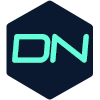
<style>
.page{position:relative;width:100px;height:100px;background:#0a192f}
.page>*{position:absolute;margin:0}
.t1{font:40px "D3-Euronism-Bold-italic";color:#64ffda}
</style>
<div class="page">
<p class="t1" style="left:12px;top:33px;width:77px;height:30px">DN</p>
</div>
